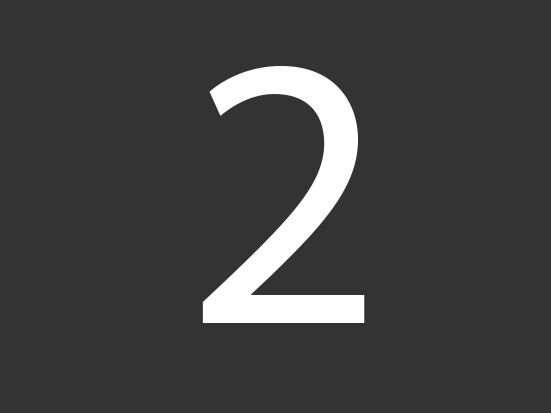
<style>
.page{position:relative;width:551px;height:413px;background:#333333}
.page>*{position:absolute;margin:0}
.t1{font:388.9px "MyriadHebrew-Regular";color:#ffffff}
</style>
<div class="page">
<p class="t1" style="left:202px;top:66px;width:163px;height:257px">2</p>
</div>
